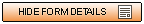
<style>
.page{position:relative;width:144px;height:24px;background:#ffffff}
.page>*{position:absolute;margin:0}
.t1{font:10.4px "Arial-BoldMT";letter-spacing:-0.075em;color:#060808;text-transform:uppercase}
</style>
<div class="page">
<p class="t1" style="left:19px;top:8px;width:87px;height:7px">HIDE Form Details</p>
</div>
